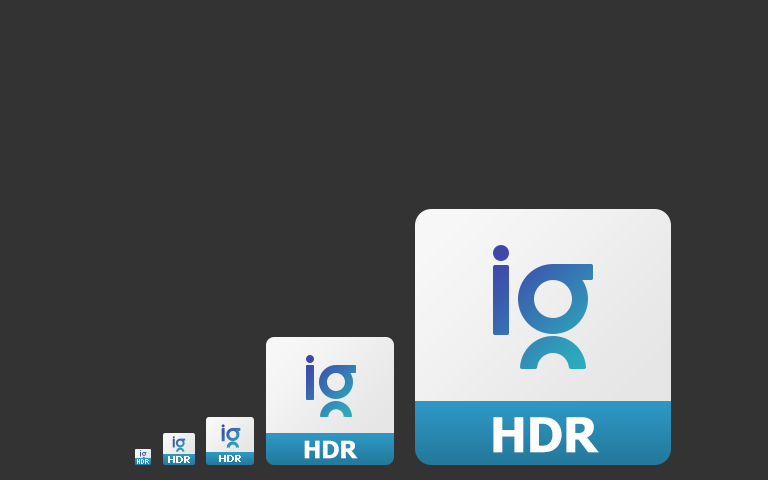
<style>
.page{position:relative;width:768px;height:480px;background:#333333}
.page>*{position:absolute;margin:0}
.t1{font:48px "Tahoma-Bold";color:#ffffff}
.t2{font:24px "Tahoma-Bold";color:#ffffff}
.t3{font:10px "Tahoma-Bold";color:#ffffff}
</style>
<div class="page">
<p class="t1" style="left:493px;top:417px;width:106px;height:36px">HDR</p>
<p class="t2" style="left:304px;top:440px;width:54px;height:19px">HDR</p>
<p class="t3" style="left:168px;top:456px;width:22px;height:7px">HDR</p>
<p class="t3" style="left:219px;top:455px;width:22px;height:7px">HDR</p>
</div>
